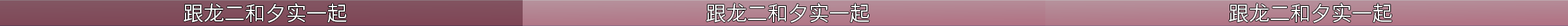
<style>
.page{position:relative;width:1568px;height:26px}
.page>*{position:absolute;margin:0}
.t1{font:20.6px "SourceHanSansSC-Normal";color:#ffffff}
</style>
<div class="page">
<p class="t1" style="left:184px;top:3px;width:163px;height:20px">跟龙二和夕实一起</p>
<p class="t1" style="left:706px;top:3px;width:164px;height:20px">跟龙二和夕实一起</p>
<p class="t1" style="left:1229px;top:3px;width:163px;height:20px">跟龙二和夕实一起</p>
</div>
